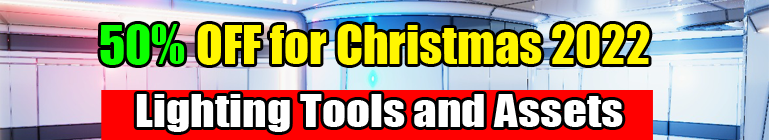
<style>
.page{position:relative;width:770px;height:140px}
.page>*{position:absolute;margin:0}
.t1{font:48.8px "Impact";color:#0cff00}
.t2{font:48.8px "Impact";color:#fff600}
.t3{font:41.8px "Impact";color:#ffffff;scale:1.13 1}
</style>
<div class="page">
<p class="t1" style="left:100px;top:24px;width:85px;height:41px">50%</p>
<p class="t2" style="left:197px;top:24px;width:453px;height:41px">OFF for Christmas 2022</p>
<p class="t3" style="left:136px;top:94px;width:487px;height:38px">Lighting Tools and Assets</p>
</div>
